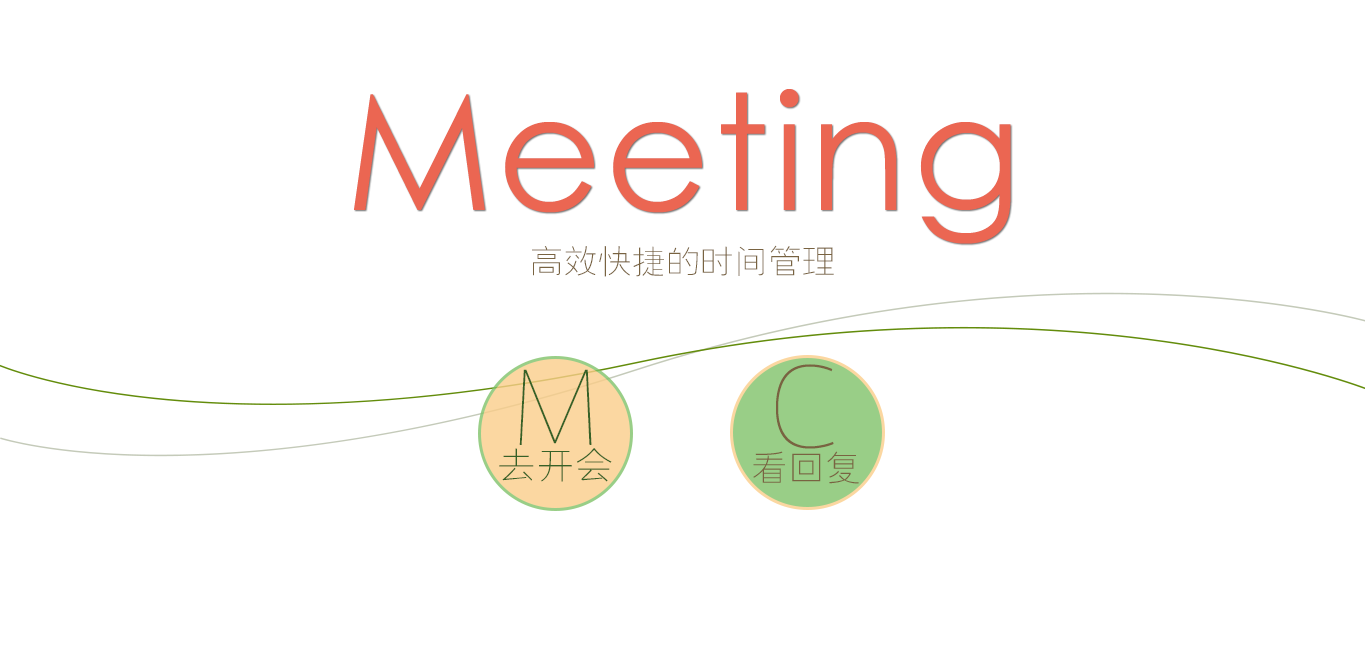
<style>
.page{position:relative;width:1365px;height:665px;background:#ffffff}
.page>*{position:absolute;margin:0}
.t1{font:161.3px "CenturyGothic";letter-spacing:0.025em;color:#eb6652}
.t2{font:33.5px "FZYXJW--GB1-0";letter-spacing:0.025em;color:#796341}
.t3{font:104.8px "AxisStd-UltraLight";letter-spacing:0.025em;color:#796341}
.t4{font:97.8px "AxisStd-UltraLight";letter-spacing:0.025em;color:#366127}
.t5{font:37.6px "FZYXJW--GB1-0";letter-spacing:0.025em;color:#366127}
.t6{font:36.2px "FZYXJW--GB1-0";letter-spacing:0.025em;color:#796341}
</style>
<div class="page">
<p class="t1" style="left:354px;top:89px;width:657px;height:155px">Meeting</p>
<p class="t2" style="left:532px;top:245px;width:302px;height:32px">高效快捷的时间管理</p>
<p class="t3" style="left:776px;top:364px;width:58px;height:85px">C</p>
<p class="t4" style="left:519px;top:369px;width:73px;height:76px">M</p>
<p class="t5" style="left:499px;top:448px;width:113px;height:34px">去开会</p>
<p class="t6" style="left:753px;top:451px;width:106px;height:33px">看回复</p>
</div>
